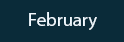
<style>
.page{position:relative;width:124px;height:42px;background:#0a2b39}
.page>*{position:absolute;margin:0}
.t1{font:18.5px "MyriadPro-Regular";color:#f0f9ff}
</style>
<div class="page">
<p class="t1" style="left:29px;top:12px;width:68px;height:18px">February</p>
</div>
